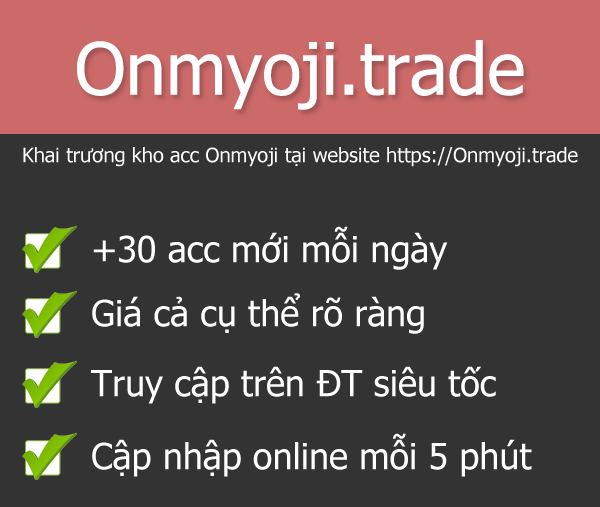
<style>
.page{position:relative;width:600px;height:507px;background:#333333}
.page>*{position:absolute;margin:0}
.t1{font:72px "Tahoma";color:#fefefe}
.t2{font:20px "Tahoma";color:#fefefe}
.t3{font:36px "Tahoma";color:#fefefe}
</style>
<div class="page">
<p class="t1" style="left:77px;top:40px;width:447px;height:70px">Onmyoji.trade</p>
<p class="t2" style="left:23px;top:147px;width:555px;height:20px">Khai trương kho acc Onmyoji tại website https://Onmyoji.trade</p>
<p class="t3" style="left:93px;top:226px;width:355px;height:44px">+30 acc mới mỗi ngày</p>
<p class="t3" style="left:92px;top:293px;width:332px;height:41px">Giá cả cụ thể rõ ràng</p>
<p class="t3" style="left:91px;top:366px;width:405px;height:38px">Truy cập trên ĐT siêu tốc</p>
<p class="t3" style="left:92px;top:433px;width:440px;height:44px">Cập nhập online mỗi 5 phút</p>
</div>
